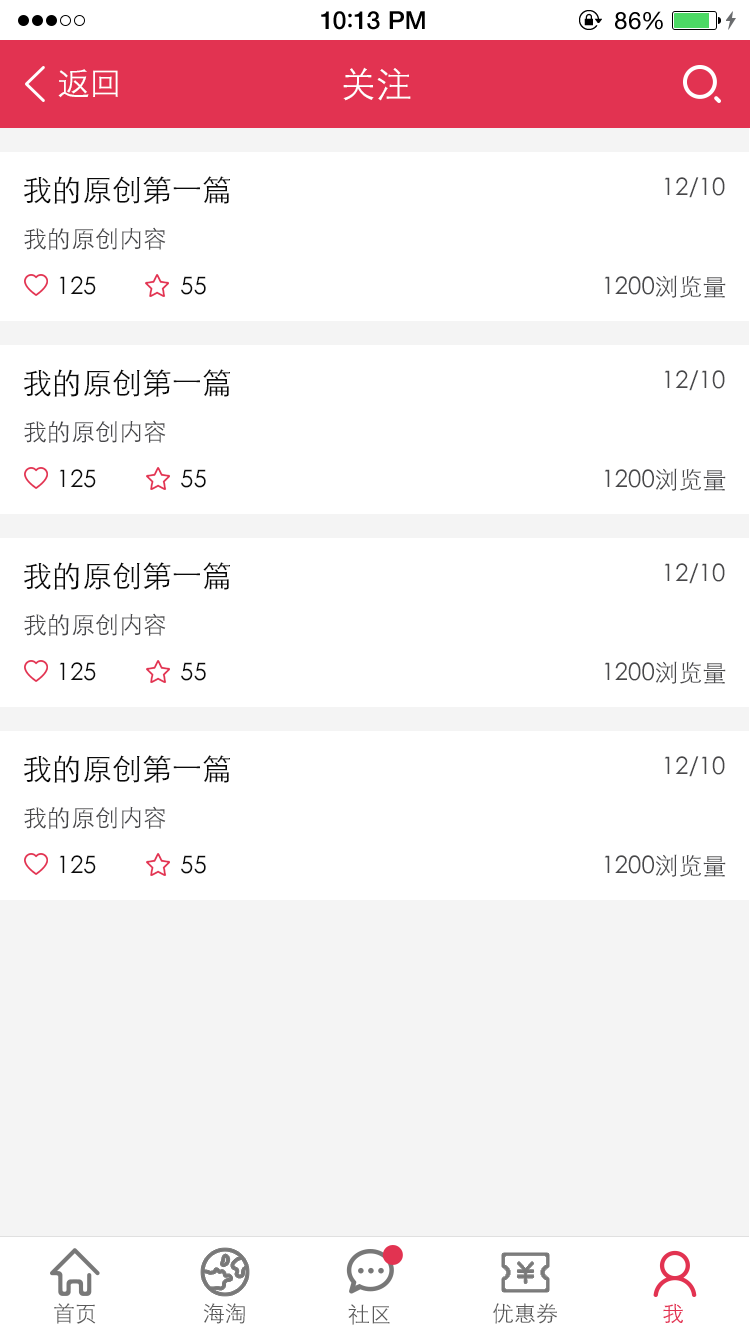
<style>
.page{position:relative;width:750px;height:1334px;background:#ffffff}
.page>*{position:absolute;margin:0}
.t1{font:25px "HelveticaNeue-Medium";letter-spacing:0.015em;color:#000000}
.t2{font:25px "ArialRoundedMTBold";letter-spacing:0.015em;color:#000000}
.t3{font:24px "HelveticaNeue";letter-spacing:0.03em;color:#000000}
.t4{font:33px "STXihei";color:#ffffff}
.t5{font:36px "STXihei";color:#ffffff}
.t6{font:30px "STXihei";color:#0a0a0a}
.t7{font:24px "STXihei";color:#48484a}
.t8{font:24px "STXihei";color:#0a0a0a}
.t9{font:21.9px "STXihei";color:#5a5a5a}
.t10{font:21.9px "STXihei";color:#e23351}
</style>
<div class="page">
<p class="t1" style="left:321px;top:11px;width:104px;height:19px">10<span class="t2">:</span>13 PM</p>
<p class="t3" style="left:615px;top:11px;width:48px;height:19px">86%</p>
<p class="t4" style="left:58px;top:69px;width:60px;height:29px">返回</p>
<p class="t5" style="left:343px;top:67px;width:68px;height:34px">关注</p>
<p class="t6" style="left:24px;top:176px;width:206px;height:28px">我的原创第一篇</p>
<p class="t7" style="left:664px;top:177px;width:61px;height:21px">12/10</p>
<p class="t7" style="left:24px;top:227px;width:142px;height:23px">我的原创内容</p>
<p class="t8" style="left:59px;top:276px;width:37px;height:19px">125</p>
<p class="t8" style="left:181px;top:276px;width:25px;height:19px">55</p>
<p class="t7" style="left:604px;top:275px;width:122px;height:23px">1200浏览量</p>
<p class="t6" style="left:24px;top:369px;width:206px;height:28px">我的原创第一篇</p>
<p class="t7" style="left:664px;top:370px;width:61px;height:21px">12/10</p>
<p class="t7" style="left:24px;top:420px;width:142px;height:23px">我的原创内容</p>
<p class="t8" style="left:59px;top:469px;width:37px;height:19px">125</p>
<p class="t8" style="left:181px;top:469px;width:25px;height:19px">55</p>
<p class="t7" style="left:604px;top:468px;width:122px;height:23px">1200浏览量</p>
<p class="t6" style="left:24px;top:562px;width:206px;height:28px">我的原创第一篇</p>
<p class="t7" style="left:664px;top:563px;width:61px;height:21px">12/10</p>
<p class="t7" style="left:24px;top:613px;width:142px;height:23px">我的原创内容</p>
<p class="t8" style="left:59px;top:662px;width:37px;height:19px">125</p>
<p class="t8" style="left:181px;top:662px;width:25px;height:19px">55</p>
<p class="t7" style="left:604px;top:661px;width:122px;height:23px">1200浏览量</p>
<p class="t6" style="left:24px;top:755px;width:206px;height:28px">我的原创第一篇</p>
<p class="t7" style="left:664px;top:756px;width:61px;height:21px">12/10</p>
<p class="t7" style="left:24px;top:806px;width:142px;height:23px">我的原创内容</p>
<p class="t8" style="left:59px;top:855px;width:37px;height:19px">125</p>
<p class="t8" style="left:181px;top:855px;width:25px;height:19px">55</p>
<p class="t7" style="left:604px;top:854px;width:122px;height:23px">1200浏览量</p>
<p class="t9" style="left:54px;top:1303px;width:42px;height:21px">首页</p>
<p class="t9" style="left:203px;top:1303px;width:42px;height:21px">海淘</p>
<p class="t9" style="left:348px;top:1304px;width:42px;height:21px">社区</p>
<p class="t9" style="left:492px;top:1303px;width:65px;height:21px">优惠券</p>
<p class="t10" style="left:663px;top:1303px;width:20px;height:20px">我</p>
</div>
